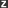
<style>
.page{position:relative;width:8px;height:8px;background:#333333}
.page>*{position:absolute;margin:0}
.t1{font:8.9px "Arial-BoldMT";color:#ffffff;scale:0.93 1}
</style>
<div class="page">
<p class="t1" style="left:1px;top:0px;width:6px;height:8px">Z</p>
</div>
